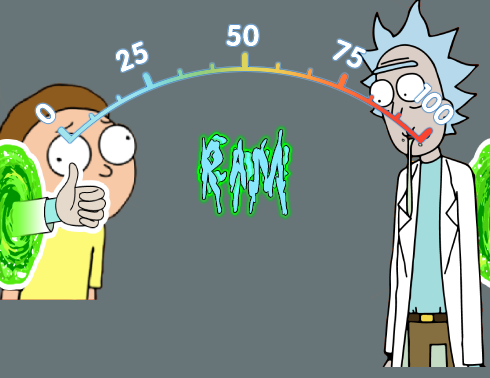
<style>
.page{position:relative;width:490px;height:378px;background:#677578}
.page>*{position:absolute;margin:0}
.t1{font:29.5px "FZY4JW--GB1-0";color:#ffffff}
</style>
<div class="page">
<p class="t1" style="left:226px;top:24px;width:33px;height:22px">50</p>
<p class="t1" style="left:226px;top:24px;width:33px;height:22px">50</p>
<p class="t1" style="left:116px;top:41px;width:32px;height:31px;rotate:-23deg">25</p>
<p class="t1" style="left:116px;top:41px;width:32px;height:31px;rotate:-23deg">25</p>
<p class="t1" style="left:333px;top:39px;width:33px;height:29px;rotate:22deg">75</p>
<p class="t1" style="left:333px;top:39px;width:33px;height:29px;rotate:22deg">75</p>
<p class="t1" style="left:414px;top:83px;width:40px;height:42px;rotate:45deg">100</p>
<p class="t1" style="left:414px;top:83px;width:40px;height:42px;rotate:45deg">100</p>
<p class="t1" style="left:35px;top:103px;width:21px;height:21px;rotate:-45deg">0</p>
<p class="t1" style="left:35px;top:103px;width:21px;height:21px;rotate:-45deg">0</p>
</div>
